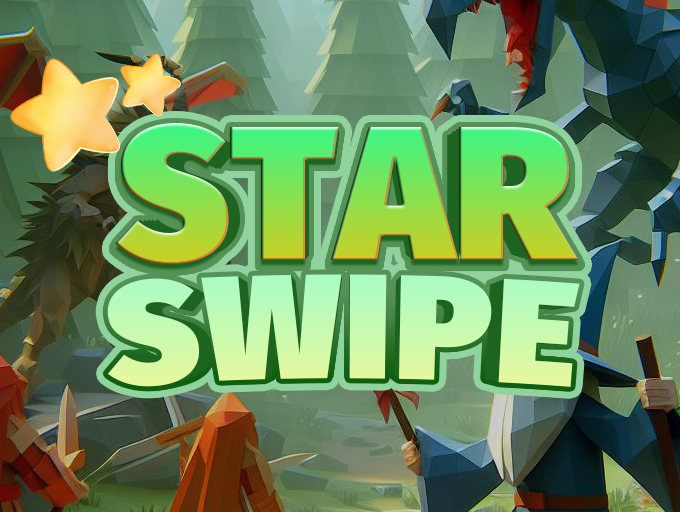
<style>
.page{position:relative;width:680px;height:512px}
.page>*{position:absolute;margin:0}
.t1{font:190px "FiraSans-Ultra"}
.t2{font:186.2px "FiraSans-Ultra"}
.t3{font:182.5px "FiraSans-Ultra"}
.t4{font:178.9px "FiraSans-Ultra"}
.t5{font:152px "FiraSans-Ultra";letter-spacing:0.025em;color:#c5fab3}
.t6{font:150.5px "FiraSans-Ultra";letter-spacing:0.025em}
.t7{font:149px "FiraSans-Ultra";letter-spacing:0.025em}
.t8{font:147.5px "FiraSans-Ultra";letter-spacing:0.025em}
.t9{font:146px "FiraSans-Ultra";letter-spacing:0.025em}
.t10{font:144.6px "FiraSans-Ultra";letter-spacing:0.025em}
.t11{font:143.1px "FiraSans-Ultra";letter-spacing:0.025em}
.t12{font:141.7px "FiraSans-Ultra";letter-spacing:0.025em}
.t13{font:140.3px "FiraSans-Ultra";letter-spacing:0.025em}
</style>
<div class="page">
<p class="t1" style="left:115px;top:123px;width:464px;height:142px">STAR</p>
<p class="t2" style="left:119px;top:124px;width:454px;height:139px">STAR</p>
<p class="t3" style="left:124px;top:127px;width:444px;height:135px">STAR</p>
<p class="t4" style="left:128px;top:129px;width:436px;height:132px">STAR</p>
<p class="t5" style="left:107px;top:274px;width:473px;height:113px">SWIPE</p>
<p class="t6" style="left:110px;top:275px;width:468px;height:112px">SWIPE</p>
<p class="t7" style="left:112px;top:275px;width:463px;height:111px">SWIPE</p>
<p class="t8" style="left:114px;top:276px;width:459px;height:110px">SWIPE</p>
<p class="t9" style="left:117px;top:277px;width:454px;height:109px">SWIPE</p>
<p class="t10" style="left:119px;top:277px;width:449px;height:108px">SWIPE</p>
<p class="t11" style="left:121px;top:278px;width:445px;height:107px">SWIPE</p>
<p class="t12" style="left:123px;top:279px;width:441px;height:105px">SWIPE</p>
<p class="t13" style="left:125px;top:279px;width:437px;height:105px">SWIPE</p>
</div>
